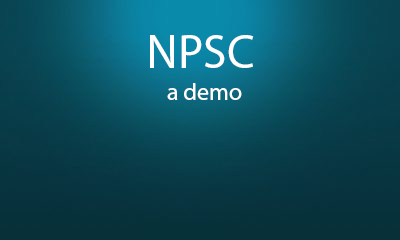
<style>
.page{position:relative;width:400px;height:240px}
.page>*{position:absolute;margin:0}
.t1{font:48px "MyriadHebrew-Regular";color:#ffffff}
.t2{font:24px "MyriadHebrew-Regular";color:#ffffff}
</style>
<div class="page">
<p class="t1" style="left:150px;top:35px;width:104px;height:33px">NPSC</p>
<p class="t2" style="left:167px;top:83px;width:75px;height:17px">a demo</p>
</div>
